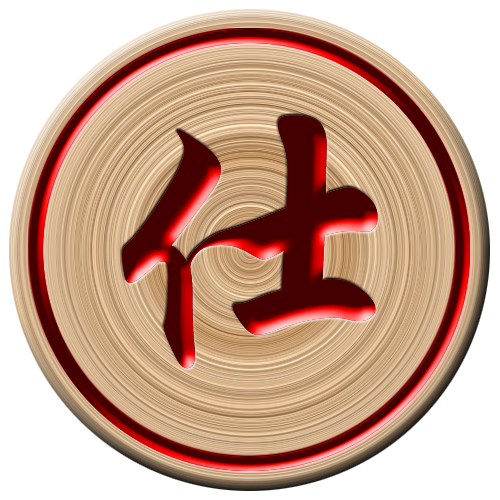
<style>
.page{position:relative;width:500px;height:500px;background:#ffffff}
.page>*{position:absolute;margin:0}
.t1{font:360px "STXingkai"}
</style>
<div class="page">
<p class="t1" style="left:122px;top:115px;width:256px;height:254px">仕</p>
</div>
